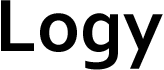
<style>
.page{position:relative;width:164px;height:70px;background:#ffffff}
.page>*{position:absolute;margin:0}
.t1{font:77.8px "Corbel-Bold";color:#000000}
</style>
<div class="page">
<p class="t1" style="left:1px;top:0px;width:162px;height:70px">Logy</p>
</div>
